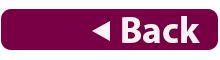
<style>
.page{position:relative;width:220px;height:60px;background:#7a0045}
.page>*{position:absolute;margin:0}
.t1{font:37.5px "MyriadPro-Bold";color:#f6f1f1}
</style>
<div class="page">
<p class="t1" style="left:122px;top:16px;width:78px;height:27px">Back</p>
</div>
